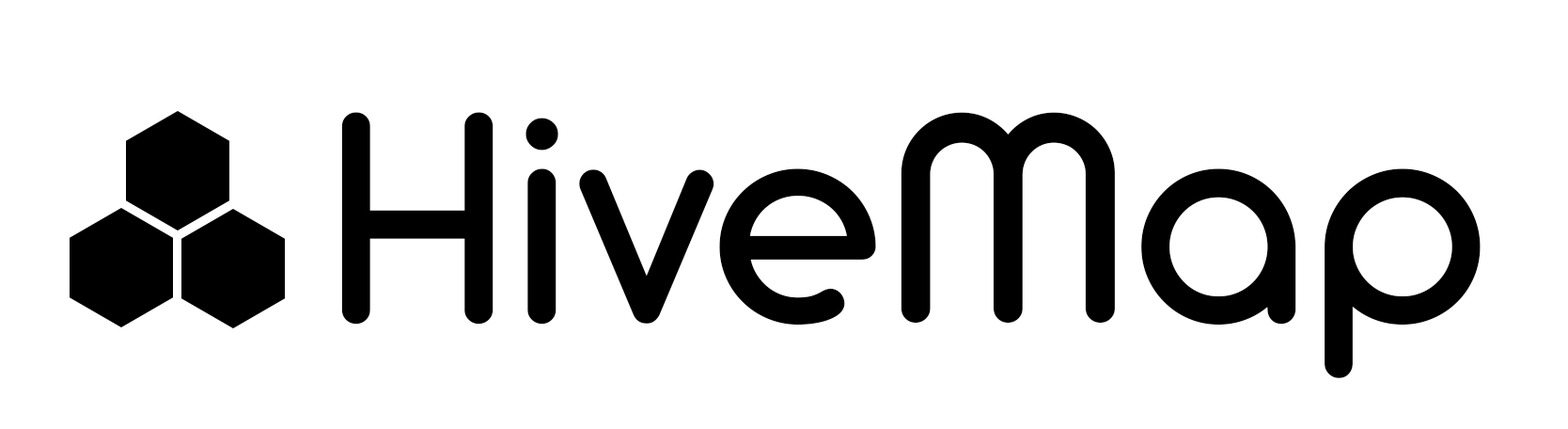
<style>
.page{position:relative;width:1568px;height:429px;background:#ffffff}
.page>*{position:absolute;margin:0}
.t1{font:326.3px "AristaProTrial-Regular";color:#000000}
</style>
<div class="page">
<p class="t1" style="left:341px;top:112px;width:1140px;height:266px">HiveMap</p>
</div>
